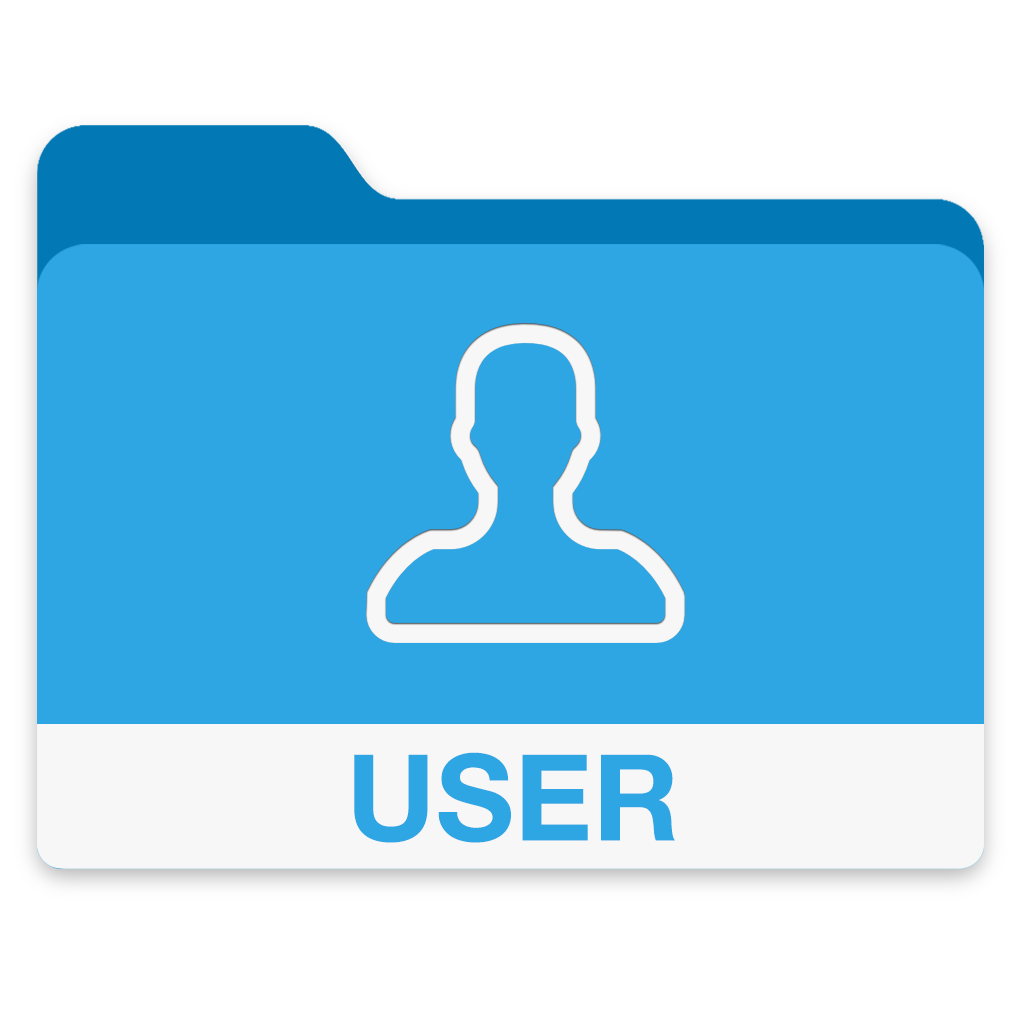
<style>
.page{position:relative;width:1024px;height:1024px;background:#2ea6e4}
.page>*{position:absolute;margin:0}
.t1{font:120px "HelveticaNeue-Bold";letter-spacing:0.005em;color:#2ea6e4}
</style>
<div class="page">
<p class="t1" style="left:354px;top:752px;width:321px;height:91px">USER</p>
</div>
